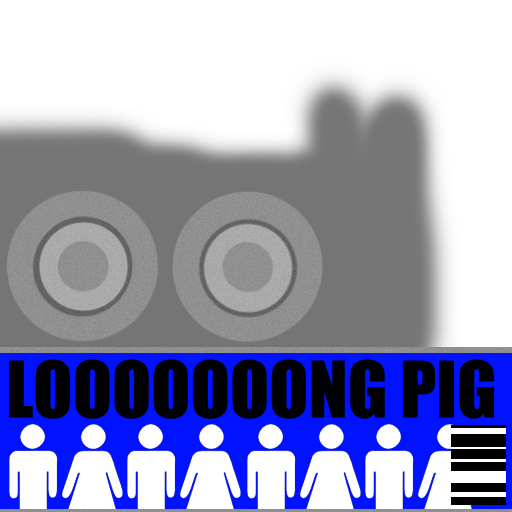
<style>
.page{position:relative;width:512px;height:512px;background:#ffffff}
.page>*{position:absolute;margin:0}
.t1{font:72px "Impact";color:#000000}
</style>
<div class="page">
<p class="t1" style="left:9px;top:359px;width:485px;height:60px">LOOOOOOONG PIG</p>
</div>
